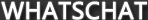
<style>
.page{position:relative;width:148px;height:20px;background:#ffffff}
.page>*{position:absolute;margin:0}
.t1{font:24px "SegoeUI";color:#ffffff;font-weight:bold}
</style>
<div class="page">
<p class="t1" style="left:1px;top:1px;width:146px;height:19px">WHATSCHAT</p>
</div>
